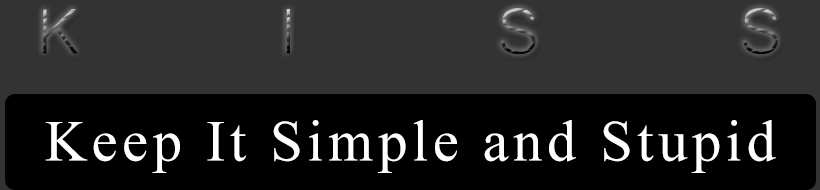
<style>
.page{position:relative;width:820px;height:190px;background:#333333}
.page>*{position:absolute;margin:0}
.t1{font:83.3px "Microsoft-Yi-Baiti";letter-spacing:2.4em}
.t2{font:58.3px "TimesNewRomanPSMT";letter-spacing:0.08em;color:#ffffff}
</style>
<div class="page">
<p class="t1" style="left:43px;top:8px;width:735px;height:47px">KISS</p>
<p class="t2" style="left:45px;top:120px;width:731px;height:53px">Keep It Simple and Stupid</p>
</div>
